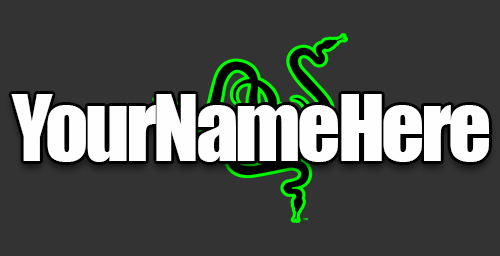
<style>
.page{position:relative;width:500px;height:256px;background:#333333}
.page>*{position:absolute;margin:0}
.t1{font:85px "Impact";letter-spacing:-0.04em;color:#fefefe}
</style>
<div class="page">
<p class="t1" style="left:11px;top:94px;width:478px;height:68px">YourNameHere</p>
</div>
